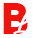
<style>
.page{position:relative;width:38px;height:38px;background:#ffffff}
.page>*{position:absolute;margin:0}
.t1{font:43px "Madani-Bold";letter-spacing:0.04em;color:#f0120c}
.t2{font:26.4px "AmerthaPERSONALUSEONLY";letter-spacing:0.04em;color:#ffffff;scale:1.05 1}
</style>
<div class="page">
<p class="t1" style="left:3px;top:3px;width:25px;height:31px">B</p>
<p class="t2" style="left:13px;top:7px;width:22px;height:28px">L</p>
</div>
